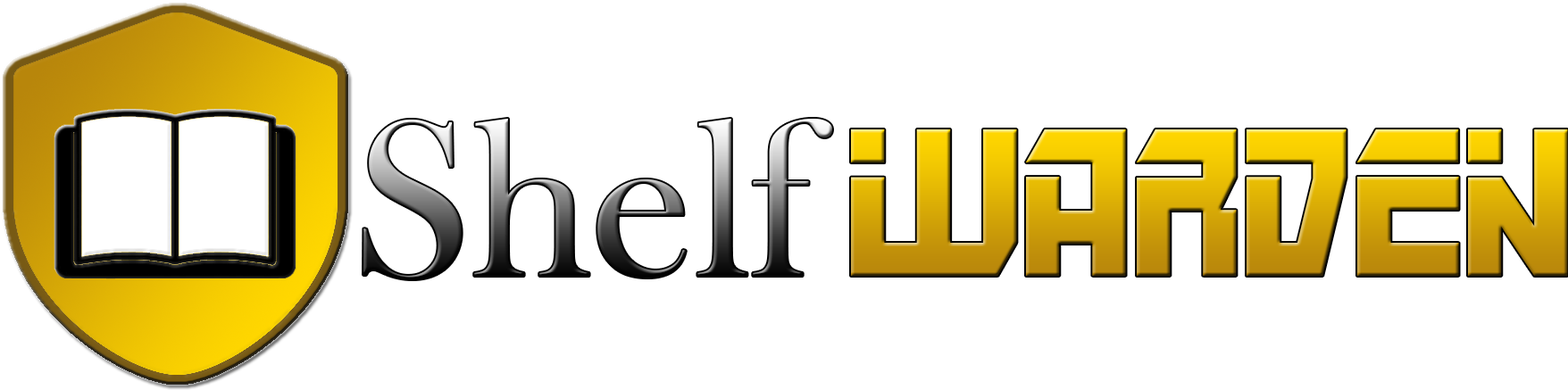
<style>
.page{position:relative;width:1568px;height:390px;background:#ffffff}
.page>*{position:absolute;margin:0}
.t1{font:228.3px "BaskOldFace"}
.t2{font:182.7px "MarsPolice"}
</style>
<div class="page">
<p class="t1" style="left:363px;top:119px;width:469px;height:160px">Shelf</p>
<p class="t2" style="left:851px;top:129px;width:717px;height:147px">Warden</p>
</div>
